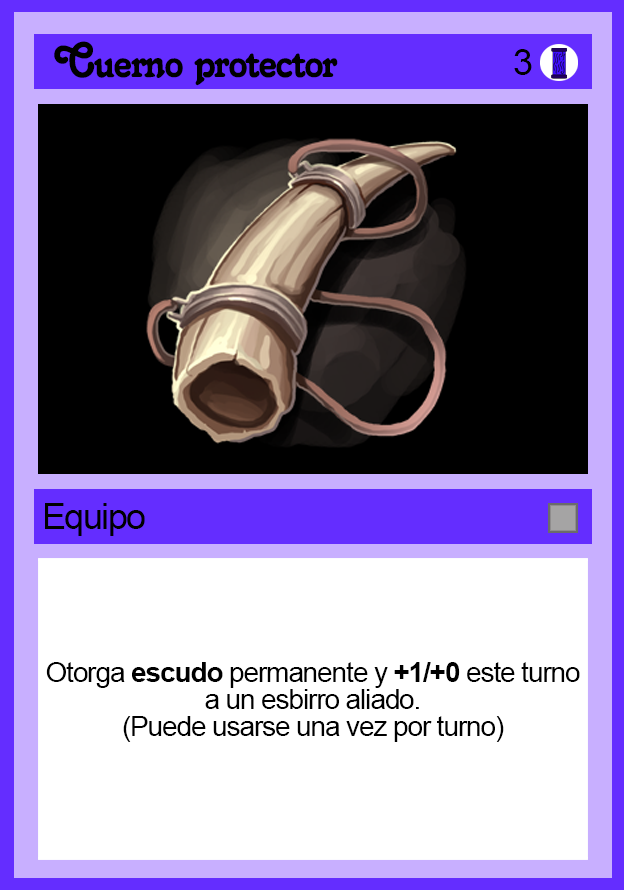
<style>
.page{position:relative;width:624px;height:890px;background:#ffffff}
.page>*{position:absolute;margin:0}
.t1{font:48px/27px "Salina";letter-spacing:-0.04em;color:#000000}
.t2{font:36px "ArialMT";letter-spacing:-0.04em;color:#000000}
.t3{font:28px/27px "ArialMT";letter-spacing:-0.04em;color:#000000}
.t4{font:28px/27px "Arial-BoldMT";letter-spacing:-0.04em;color:#000000}
</style>
<div class="page">
<p class="t1" style="left:54px;top:41px;width:284px;height:45px;text-align:center">Cuerno protector<br>´´ñgfdsa</p>
<p class="t2" style="left:514px;top:49px;width:18px;height:26px">3</p>
<p class="t2" style="left:45px;top:503px;width:100px;height:33px">Equipo</p>
<p class="t3" style="left:46px;top:662px;width:534px;height:80px;text-align:center">Otorga <span class="t4">escudo </span>permanente y <span class="t4">+1/+0 </span>este turno a un esbirro aliado.<br>(Puede usarse una vez por turno)</p>
</div>
